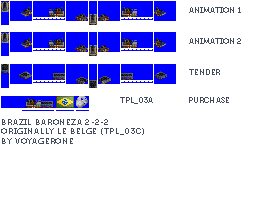
<style>
.page{position:relative;width:264px;height:200px;background:#ffffff}
.page>*{position:absolute;margin:0}
.t1{font:8px "Museo700-Regular";color:#444c5c;text-transform:uppercase}
.t2{font:8px "Museo700-Regular";letter-spacing:0.075em;color:#444c5c;text-transform:uppercase}
</style>
<div class="page">
<p class="t1" style="left:189px;top:7px;width:52px;height:6px">Animation 1</p>
<p class="t1" style="left:189px;top:38px;width:52px;height:6px">Animation 2</p>
<p class="t1" style="left:189px;top:69px;width:31px;height:6px">Tender</p>
<p class="t1" style="left:120px;top:97px;width:33px;height:7px">TPL_03A</p>
<p class="t1" style="left:189px;top:97px;width:40px;height:6px">Purchase</p>
<p class="t2" style="left:1px;top:119px;width:143px;height:25px">brazil baroneza 2-2-2<br>originally le belge (tpl_03c)<br>by voyagerone</p>
</div>
